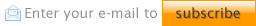
<style>
.page{position:relative;width:256px;height:26px;background:#ffffff}
.page>*{position:absolute;margin:0}
.t1{font:14px "LucidaSans";color:#8f8f8f}
.t2{font:14px "LucidaSans";color:#333333}
</style>
<div class="page">
<p class="t1" style="left:25px;top:7px;width:132px;height:14px">Enter your e-mail to</p>
<p class="t2" style="left:176px;top:7px;width:64px;height:11px">subscribe</p>
</div>
